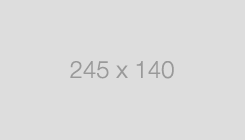
<style>
.page{position:relative;width:245px;height:140px;background:#dddddd}
.page>*{position:absolute;margin:0}
.t1{font:24px "HelveticaNeue-Light";color:#999999}
</style>
<div class="page">
<p class="t1" style="left:70px;top:61px;width:104px;height:18px">245 x 140</p>
</div>
